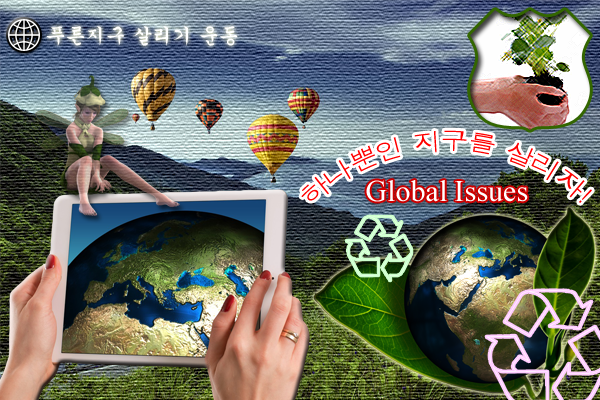
<style>
.page{position:relative;width:600px;height:400px}
.page>*{position:absolute;margin:0}
.t1{font:20px "Gungsuh";color:#ffffff}
.t2{font:24px/50px "Dotum";color:#ff0000}
.t3{font:30px "TimesNewRomanPSMT";color:#ffffff}
</style>
<div class="page">
<p class="t1" style="left:46px;top:26px;width:192px;height:20px">푸른지구 살리기 운동</p>
<p class="t2" style="left:301px;top:130px;width:291px;height:73px">하나뿐인 지구를 살리자!</p>
<p class="t3" style="left:366px;top:180px;width:162px;height:22px">Global Issues</p>
</div>
